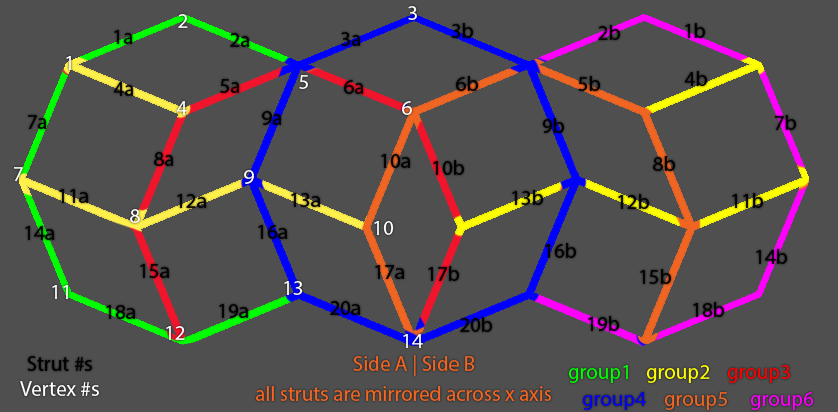
<style>
.page{position:relative;width:838px;height:412px;background:#4f4f4f}
.page>*{position:absolute;margin:0}
.t1{font:21px "MyriadPro-Regular";color:#ffffff}
.t2{font:21px "MyriadPro-Regular";color:#000000}
.t3{font:21px "MyriadPro-Regular";color:#fefefe}
.t4{font:21px "MyriadPro-Regular";color:#f26522}
.t5{font:21px "MyriadPro-Regular";color:#00ff00}
.t6{font:21px "MyriadPro-Regular";color:#ffff00}
.t7{font:21px "MyriadPro-Regular";color:#ff0000}
.t8{font:21px "MyriadPro-Regular";color:#0000ff}
.t9{font:21px "MyriadPro-Regular";color:#f16522}
.t10{font:21px "MyriadPro-Regular";color:#ff00ff}
</style>
<div class="page">
<p class="t1" style="left:408px;top:6px;width:9px;height:14px">3</p>
<p class="t1" style="left:178px;top:14px;width:10px;height:14px">2</p>
<p class="t2" style="left:114px;top:30px;width:19px;height:14px">1a</p>
<p class="t2" style="left:451px;top:23px;width:22px;height:15px">3b</p>
<p class="t2" style="left:598px;top:25px;width:22px;height:15px">2b</p>
<p class="t2" style="left:685px;top:23px;width:20px;height:15px">1b</p>
<p class="t2" style="left:230px;top:33px;width:20px;height:14px">2a</p>
<p class="t2" style="left:341px;top:32px;width:20px;height:14px">3a</p>
<p class="t1" style="left:66px;top:56px;width:5px;height:14px">1</p>
<p class="t1" style="left:299px;top:75px;width:9px;height:14px">5</p>
<p class="t2" style="left:456px;top:76px;width:22px;height:15px">6b</p>
<p class="t2" style="left:578px;top:76px;width:22px;height:15px">5b</p>
<p class="t2" style="left:684px;top:71px;width:23px;height:15px">4b</p>
<p class="t2" style="left:113px;top:82px;width:21px;height:14px">4a</p>
<p class="t2" style="left:220px;top:79px;width:20px;height:14px">5a</p>
<p class="t2" style="left:344px;top:80px;width:20px;height:14px">6a</p>
<p class="t1" style="left:176px;top:101px;width:11px;height:14px">4</p>
<p class="t1" style="left:402px;top:101px;width:10px;height:14px">6</p>
<p class="t2" style="left:262px;top:111px;width:20px;height:14px">9a</p>
<p class="t2" style="left:28px;top:115px;width:19px;height:14px">7a</p>
<p class="t2" style="left:542px;top:118px;width:22px;height:15px">9b</p>
<p class="t2" style="left:775px;top:115px;width:21px;height:15px">7b</p>
<p class="t2" style="left:154px;top:152px;width:20px;height:14px">8a</p>
<p class="t2" style="left:381px;top:154px;width:30px;height:14px">10a</p>
<p class="t2" style="left:433px;top:160px;width:31px;height:15px">10b</p>
<p class="t2" style="left:653px;top:156px;width:22px;height:15px">8b</p>
<p class="t1" style="left:14px;top:167px;width:9px;height:14px">7</p>
<p class="t1" style="left:244px;top:170px;width:10px;height:14px">9</p>
<p class="t2" style="left:59px;top:189px;width:30px;height:14px">11a</p>
<p class="t2" style="left:177px;top:194px;width:30px;height:14px">12a</p>
<p class="t2" style="left:291px;top:193px;width:30px;height:14px">13a</p>
<p class="t2" style="left:512px;top:190px;width:31px;height:15px">13b</p>
<p class="t2" style="left:618px;top:194px;width:31px;height:15px">12b</p>
<p class="t2" style="left:732px;top:193px;width:31px;height:15px">11b</p>
<p class="t1" style="left:130px;top:209px;width:10px;height:14px">8</p>
<p class="t1" style="left:374px;top:221px;width:20px;height:14px">10</p>
<p class="t2" style="left:25px;top:226px;width:30px;height:14px">14a</p>
<p class="t2" style="left:258px;top:225px;width:30px;height:14px">16a</p>
<p class="t2" style="left:545px;top:243px;width:31px;height:15px">16b</p>
<p class="t2" style="left:756px;top:249px;width:31px;height:15px">14b</p>
<p class="t2" style="left:140px;top:264px;width:30px;height:14px">15a</p>
<p class="t2" style="left:375px;top:265px;width:30px;height:14px">17a</p>
<p class="t2" style="left:428px;top:266px;width:31px;height:15px">17b</p>
<p class="t2" style="left:640px;top:269px;width:31px;height:15px">15b</p>
<p class="t1" style="left:284px;top:281px;width:19px;height:14px">13</p>
<p class="t1" style="left:52px;top:285px;width:16px;height:14px">11</p>
<p class="t2" style="left:106px;top:305px;width:30px;height:14px">18a</p>
<p class="t2" style="left:219px;top:304px;width:30px;height:14px">19a</p>
<p class="t2" style="left:330px;top:301px;width:31px;height:14px">20a</p>
<p class="t2" style="left:693px;top:302px;width:31px;height:15px">18b</p>
<p class="t2" style="left:460px;top:317px;width:32px;height:15px">20b</p>
<p class="t2" style="left:588px;top:316px;width:31px;height:15px">19b</p>
<p class="t1" style="left:166px;top:326px;width:19px;height:14px">12</p>
<p class="t1" style="left:403px;top:334px;width:20px;height:14px">14</p>
<p class="t3" style="left:20px;top:356px;width:79px;height:40px;text-align:center"><span class="t2">Strut #s<br></span>Vertex #s</p>
<p class="t4" style="left:353px;top:355px;width:122px;height:22px">Side A | Side B</p>
<p class="t5" style="left:568px;top:365px;width:60px;height:18px">group1</p>
<p class="t6" style="left:646px;top:365px;width:64px;height:18px">group2</p>
<p class="t7" style="left:727px;top:365px;width:63px;height:18px">group3</p>
<p class="t4" style="left:255px;top:386px;width:296px;height:15px">all struts are mirrored across x axis</p>
<p class="t8" style="left:582px;top:392px;width:64px;height:18px">group4</p>
<p class="t9" style="left:664px;top:392px;width:63px;height:18px">group5</p>
<p class="t10" style="left:750px;top:392px;width:64px;height:18px">group6</p>
</div>
